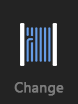
<style>
.page{position:relative;width:78px;height:104px;background:#232323}
.page>*{position:absolute;margin:0}
.t1{font:14px "SegoeUI";color:#7c7c7c;font-weight:bold}
</style>
<div class="page">
<p class="t1" style="left:14px;top:82px;width:50px;height:14px">Change</p>
</div>
